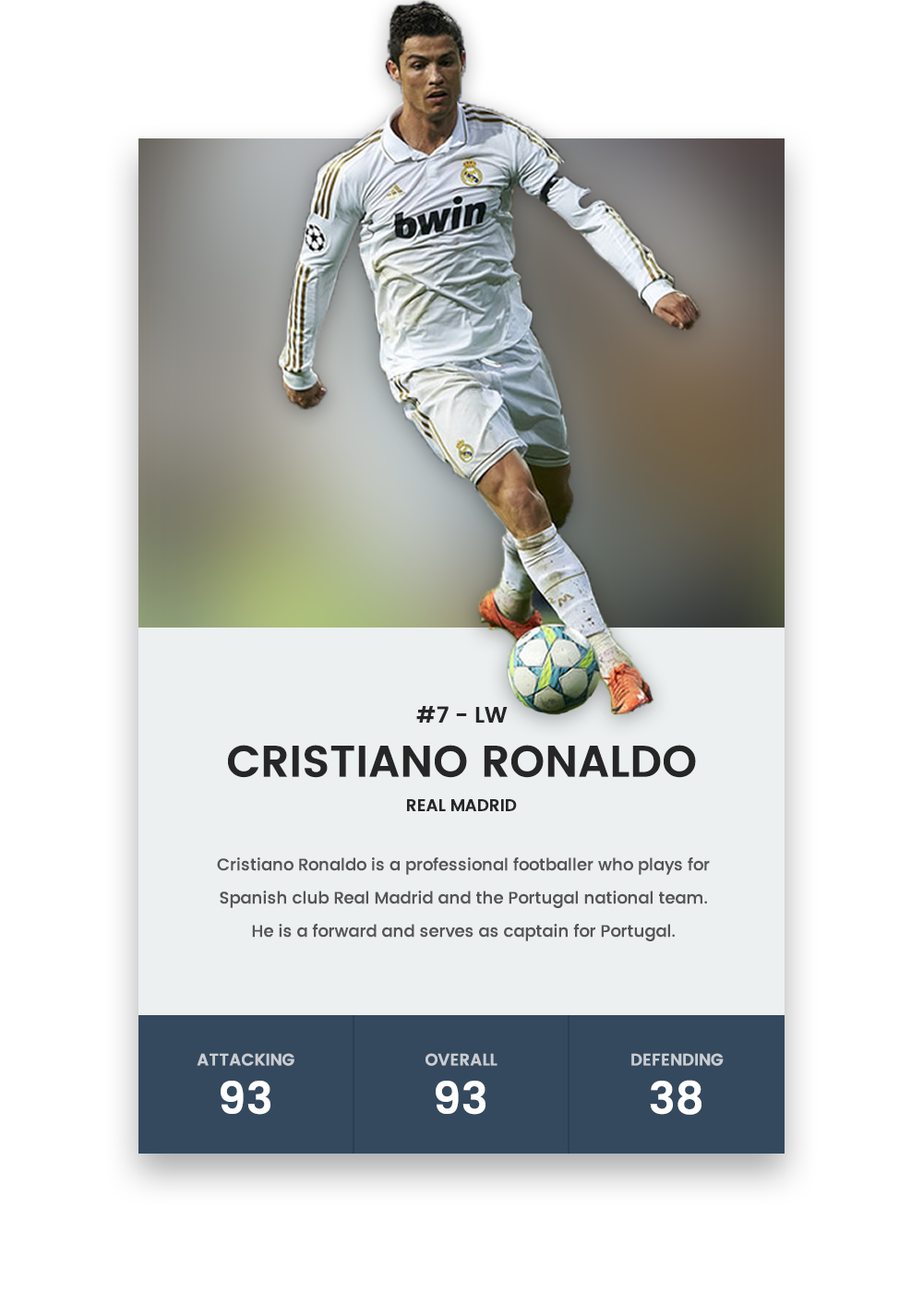
<style>
.page{position:relative;width:923px;height:1292px;background:#ffffff}
.page>*{position:absolute;margin:0}
.t1{font:22.1px "Poppins-SemiBold";color:#262626}
.t2{font:44.3px "Poppins-SemiBold";color:#262626}
.t3{font:16.6px "Poppins-SemiBold";color:#262626}
.t4{font:16.6px/33.2px "Poppins-Medium";color:#555555}
.t5{font:16.6px "Poppins-SemiBold";color:#c9cdd1}
.t6{font:44.3px "Poppins-SemiBold";color:#ffffff}
</style>
<div class="page">
<p class="t1" style="left:416px;top:706px;width:92px;height:17px">#7 - LW</p>
<p class="t2" style="left:228px;top:745px;width:468px;height:33px">CRISTIANO RONALDO</p>
<p class="t3" style="left:407px;top:799px;width:110px;height:12px">REAL MADRID</p>
<p class="t4" style="left:217px;top:857px;width:493px;height:84px;text-align:center">Cristiano Ronaldo is a professional footballer who plays for<br>Spanish club Real Madrid and the Portugal national team.<br>He is a forward and serves as captain for Portugal.</p>
<p class="t5" style="left:197px;top:1053px;width:97px;height:13px">ATTACKING</p>
<p class="t5" style="left:425px;top:1053px;width:72px;height:13px">OVERALL</p>
<p class="t5" style="left:631px;top:1053px;width:93px;height:13px">DEFENDING</p>
<p class="t6" style="left:221px;top:1081px;width:49px;height:34px">93</p>
<p class="t6" style="left:436px;top:1081px;width:49px;height:34px">93</p>
<p class="t6" style="left:650px;top:1080px;width:51px;height:35px">38</p>
</div>
